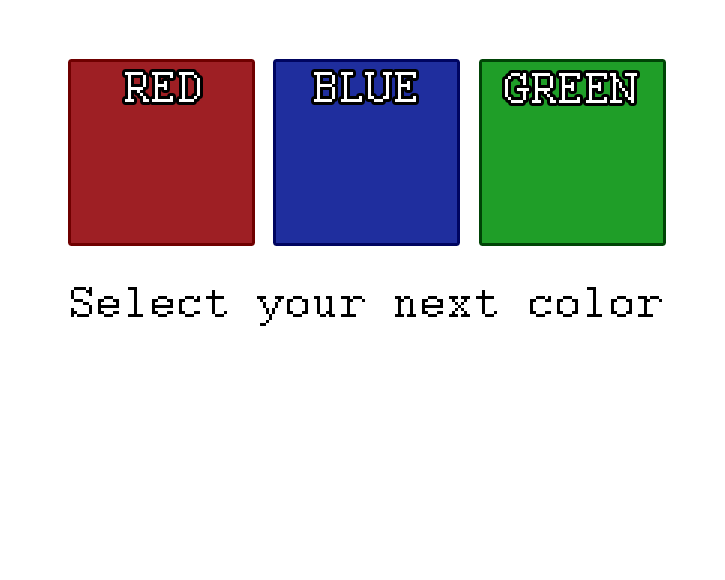
<style>
.page{position:relative;width:725px;height:580px;background:#ffffff}
.page>*{position:absolute;margin:0}
.t1{font:48px "Courier";color:#ffffff}
.t2{font:48px "Courier";color:#000000}
</style>
<div class="page">
<p class="t1" style="left:125px;top:72px;width:75px;height:30px">RED</p>
<p class="t1" style="left:314px;top:72px;width:102px;height:30px">BLUE</p>
<p class="t1" style="left:505px;top:73px;width:132px;height:30px">GREEN</p>
<p class="t2" style="left:71px;top:287px;width:591px;height:39px">Select your next color</p>
</div>
